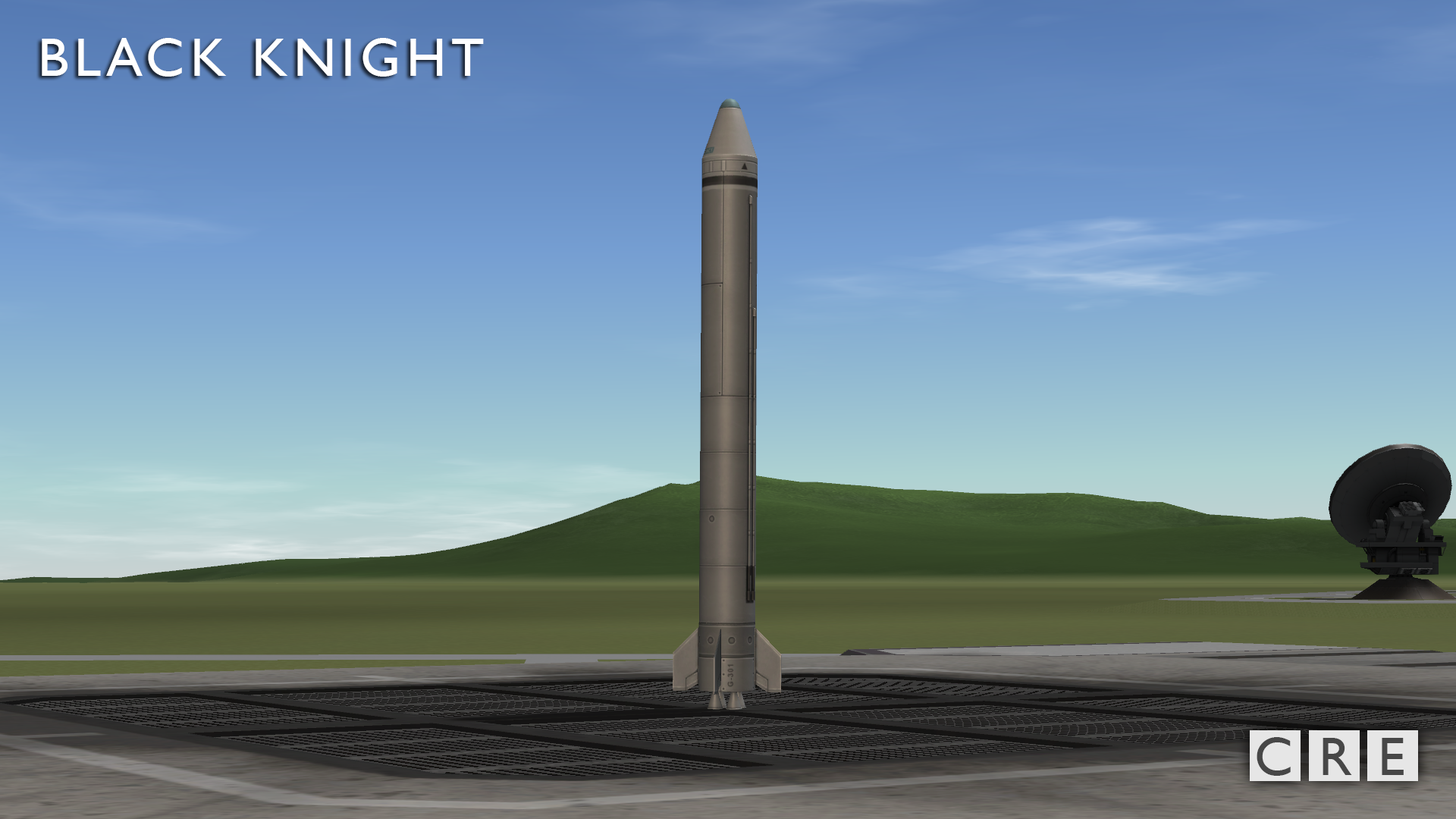
<style>
.page{position:relative;width:1456px;height:819px}
.page>*{position:absolute;margin:0}
.t1{font:54.6px "GillSansMT";letter-spacing:0.1em;color:#ffffff}
.t2{font:54.6px "GillSansMT";letter-spacing:0.1em;color:#474747}
</style>
<div class="page">
<p class="t1" style="left:42px;top:38px;width:442px;height:39px">BLACK KNIGHT</p>
<p class="t2" style="left:1257px;top:737px;width:147px;height:39px">C R E</p>
</div>
